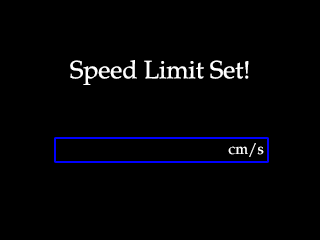
<style>
.page{position:relative;width:320px;height:240px;background:#000000}
.page>*{position:absolute;margin:0}
.t1{font:25px "BookAntiqua";color:#ffffff}
.t2{font:15px "BookAntiqua";color:#ffffff}
</style>
<div class="page">
<p class="t1" style="left:70px;top:60px;width:179px;height:25px">Speed Limit Set!</p>
<p class="t2" style="left:228px;top:143px;width:36px;height:14px">cm/s</p>
</div>
